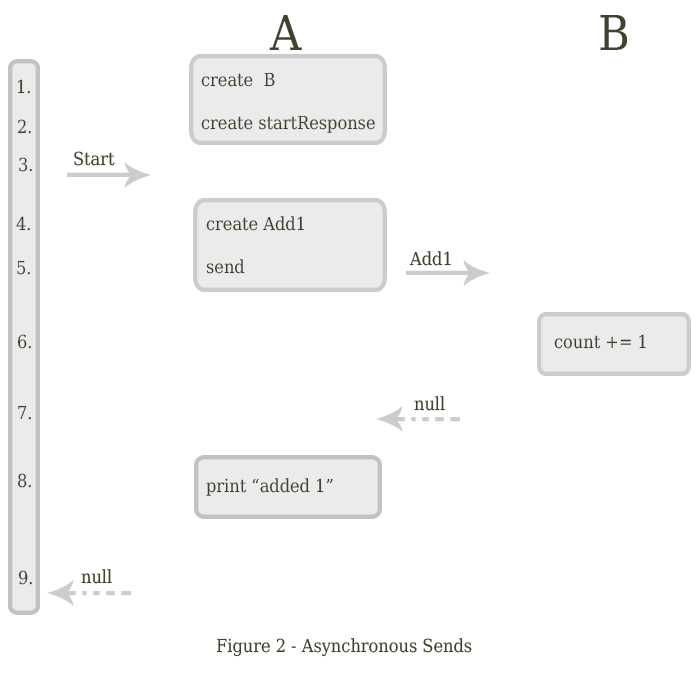
<style>
.page{position:relative;width:700px;height:700px;background:#ffffff}
.page>*{position:absolute;margin:0}
.t1{font:48px "DejaVuSerifCondensed";color:#3c442e}
.t2{font:18px "DejaVuSerifCondensed";color:#3c442e}
</style>
<div class="page">
<p class="t1" style="left:269px;top:15px;width:33px;height:35px">A</p>
<p class="t1" style="left:600px;top:15px;width:27px;height:35px">B</p>
<p class="t2" style="left:201px;top:72px;width:174px;height:61px">create  B<br><br>create startResponse</p>
<p class="t2" style="left:18px;top:79px;width:12px;height:15px">1.</p>
<p class="t2" style="left:17px;top:119px;width:14px;height:15px">2.</p>
<p class="t2" style="left:19px;top:157px;width:13px;height:15px">3.</p>
<p class="t2" style="left:74px;top:151px;width:41px;height:15px">Start</p>
<p class="t2" style="left:16px;top:216px;width:14px;height:15px">4.</p>
<p class="t2" style="left:206px;top:216px;width:98px;height:58px">create Add1<br><br>send</p>
<p class="t2" style="left:409px;top:251px;width:42px;height:15px">Add1</p>
<p class="t2" style="left:17px;top:260px;width:13px;height:15px">5.</p>
<p class="t2" style="left:17px;top:334px;width:14px;height:15px">6.</p>
<p class="t2" style="left:554px;top:334px;width:92px;height:15px">count += 1</p>
<p class="t2" style="left:414px;top:396px;width:31px;height:15px">null</p>
<p class="t2" style="left:18px;top:405px;width:13px;height:15px">7.</p>
<p class="t2" style="left:17px;top:473px;width:14px;height:15px">8.</p>
<p class="t2" style="left:206px;top:478px;width:127px;height:18px">print “added 1”</p>
<p class="t2" style="left:81px;top:569px;width:31px;height:15px">null</p>
<p class="t2" style="left:18px;top:570px;width:14px;height:15px">9.</p>
<p class="t2" style="left:216px;top:638px;width:256px;height:19px">Figure 2 - Asynchronous Sends</p>
</div>
